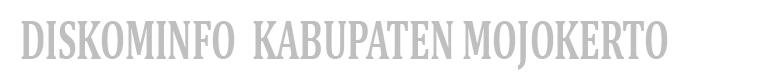
<style>
.page{position:relative;width:769px;height:76px;background:#ffffff}
.page>*{position:absolute;margin:0}
.t1{font:57.4px "Cambria-Bold";color:#bfbfbf;scale:0.62 1}
</style>
<div class="page">
<p class="t1" style="left:21px;top:21px;width:647px;height:49px">DISKOMINFO  KABUPATEN MOJOKERTO</p>
</div>
